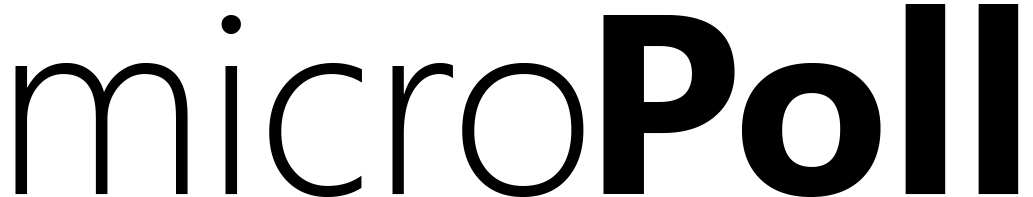
<style>
.page{position:relative;width:1033px;height:197px;background:#ffffff}
.page>*{position:absolute;margin:0}
.t1{font:256px "SegoeUI-Bold";color:#000000}
.t2{font:256px "SegoeUI-Light";color:#000000}
</style>
<div class="page">
<p class="t1" style="left:603px;top:4px;width:416px;height:193px">Poll</p>
<p class="t2" style="left:15px;top:15px;width:569px;height:182px">micro</p>
</div>
